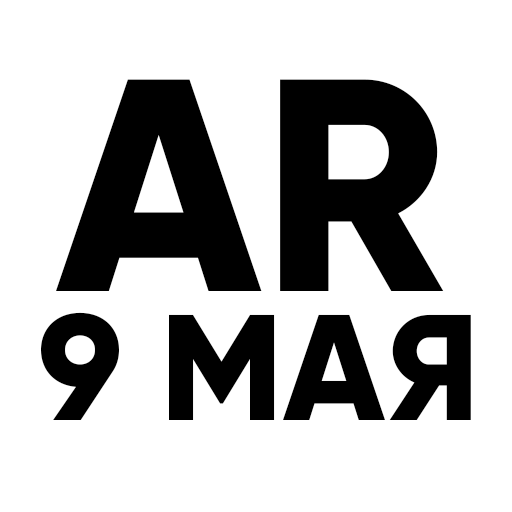
<style>
.page{position:relative;width:512px;height:512px;background:#ffffff}
.page>*{position:absolute;margin:0}
.t1{font:302px "Gilroy-ExtraBold";color:#000000}
.t2{font:150px "Gilroy-ExtraBold";color:#000000}
</style>
<div class="page">
<p class="t1" style="left:56px;top:79px;width:388px;height:212px">AR</p>
<p class="t2" style="left:41px;top:312px;width:430px;height:108px">9 МАЯ</p>
</div>
